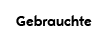
<style>
.page{position:relative;width:107px;height:43px;background:#ffffff}
.page>*{position:absolute;margin:0}
.t1{font:14px "OpelSans-Bold";color:#000000}
</style>
<div class="page">
<p class="t1" style="left:16px;top:15px;width:76px;height:11px">Gebrauchte</p>
</div>
